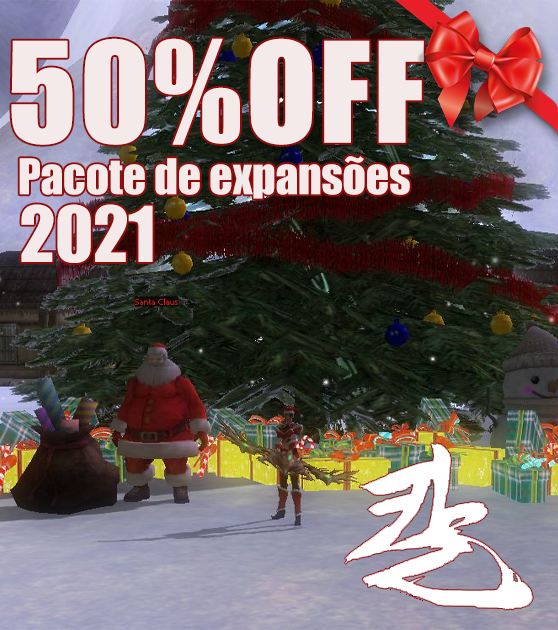
<style>
.page{position:relative;width:558px;height:630px}
.page>*{position:absolute;margin:0}
.t1{font:127.9px "Impact";color:#f5eaea;font-weight:bold}
.t2{font:45.4px "Impact";color:#f5eaea}
.t3{font:71.2px "Impact";color:#f5eaea}
</style>
<div class="page">
<p class="t1" style="left:11px;top:38px;width:413px;height:107px">50%OFF</p>
<p class="t2" style="left:19px;top:156px;width:391px;height:43px">Pacote de expansões</p>
<p class="t3" style="left:21px;top:204px;width:132px;height:59px">2021</p>
</div>
